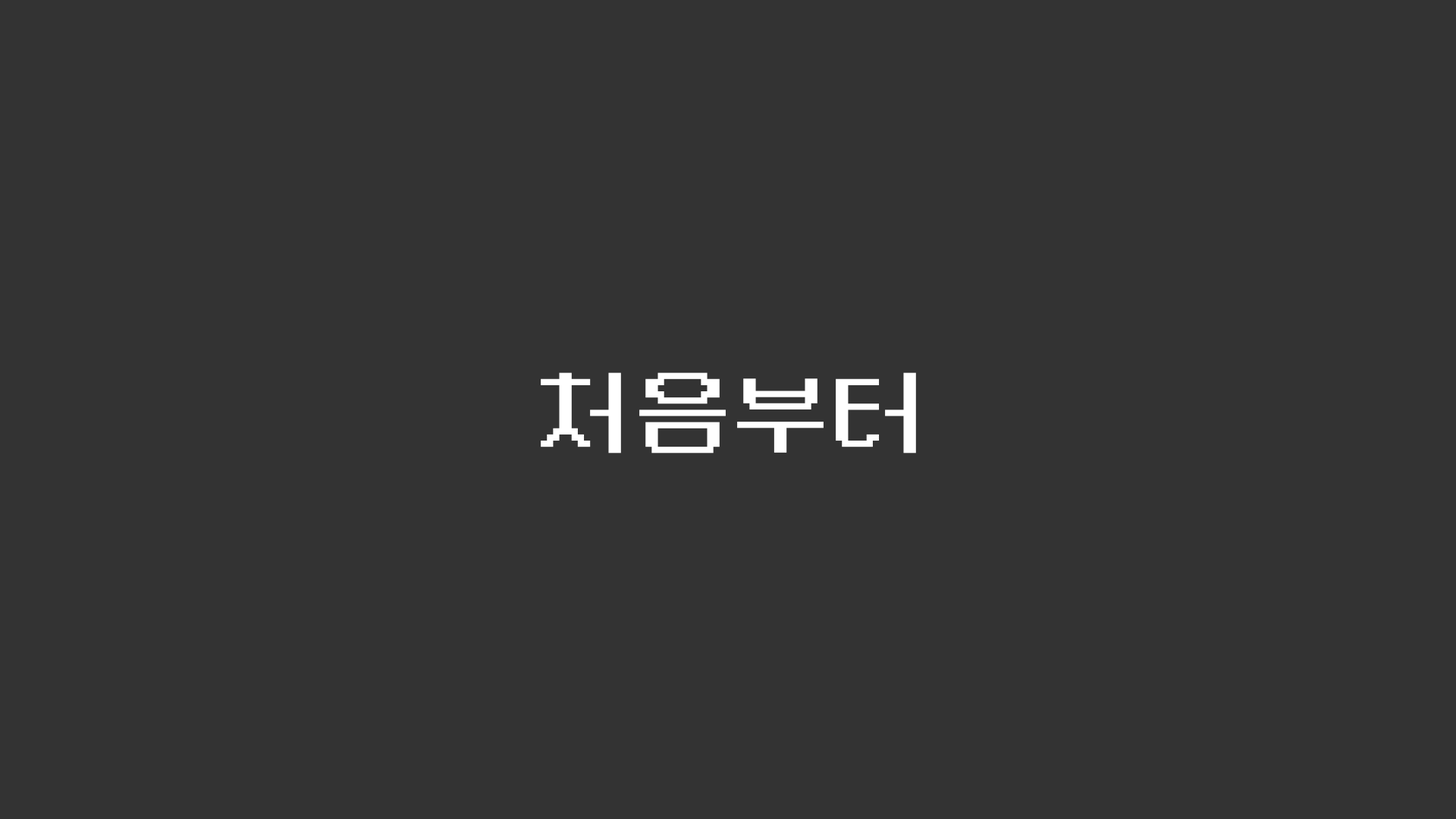
<style>
.page{position:relative;width:1456px;height:819px;background:#333333}
.page>*{position:absolute;margin:0}
.t1{font:98.2px "NeoDunggeunmo-Regular";color:#ffffff}
</style>
<div class="page">
<p class="t1" style="left:541px;top:372px;width:375px;height:81px">처음부터</p>
</div>
